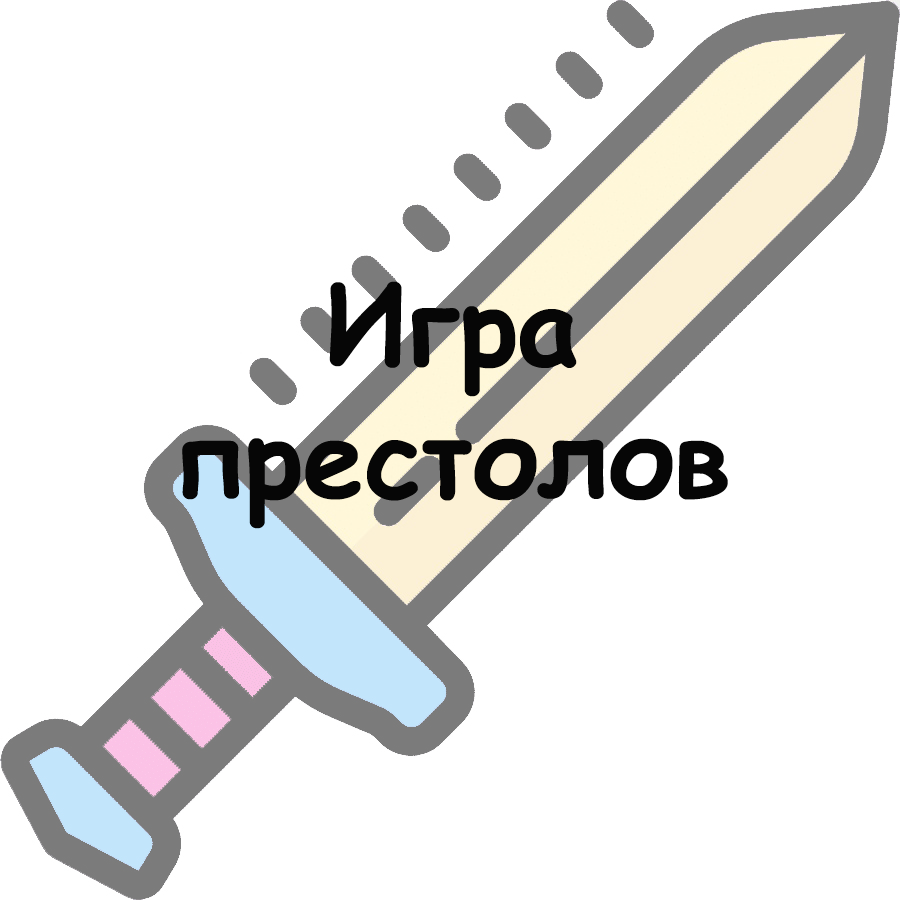
<style>
.page{position:relative;width:900px;height:900px;background:#ffffff}
.page>*{position:absolute;margin:0}
.t1{font:110px "ComicSansMS-Bold";color:#060606}
</style>
<div class="page">
<p class="t1" style="left:182px;top:281px;width:546px;height:248px;text-align:center">Игра престолов</p>
</div>
